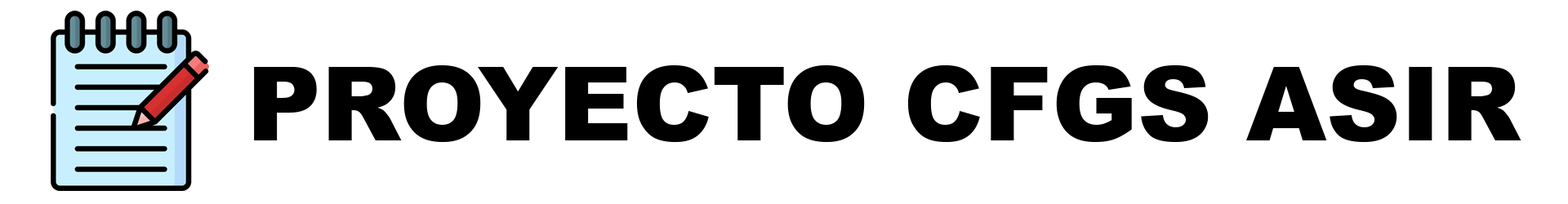
<style>
.page{position:relative;width:1568px;height:204px;background:#ffffff}
.page>*{position:absolute;margin:0}
.t1{font:102.9px "Arial-Black";color:#000000}
</style>
<div class="page">
<p class="t1" style="left:254px;top:65px;width:1267px;height:77px">PROYECTO CFGS ASIR</p>
</div>
